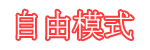
<style>
.page{position:relative;width:150px;height:50px;background:#ffffff}
.page>*{position:absolute;margin:0}
.t1{font:30px "STSong";color:#ffffff;font-weight:bold}
</style>
<div class="page">
<p class="t1" style="left:17px;top:10px;width:116px;height:30px">自由模式</p>
</div>
